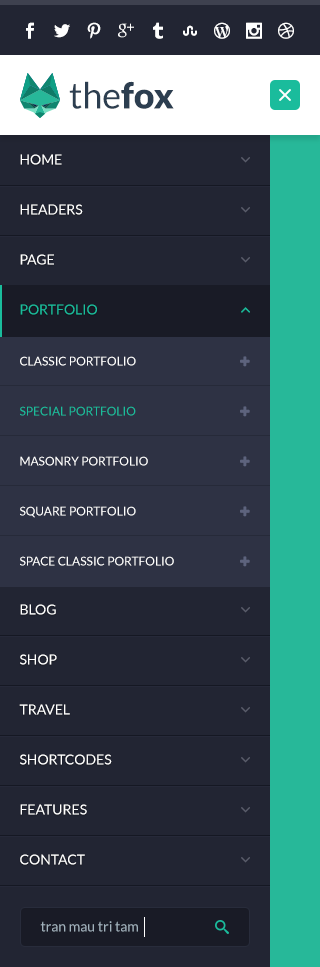
<style>
.page{position:relative;width:320px;height:967px;background:#222533}
.page>*{position:absolute;margin:0}
.t1{font:36px "Lato-Regular";color:#2c3e50}
.t2{font:36px "Lato-Black";color:#2c3e50}
.t3{font:14px/50px "Lato-Regular";color:#ffffff;text-transform:uppercase}
.t4{font:14px/50px "Lato-Regular";color:#1abc9c;text-transform:uppercase}
.t5{font:12px/50px "Lato-Regular";color:#ffffff;text-transform:uppercase}
.t6{font:12px/50px "Lato-Regular";color:#1abc9c;text-transform:uppercase}
.t7{font:14px "Lato-Regular";color:#a1b1bc}
</style>
<div class="page">
<p class="t1" style="left:69px;top:81px;width:105px;height:28px">the<span class="t2">fox</span></p>
<p class="t3" style="left:19px;top:154px;width:93px;height:711px">Home<br>HEADERS<br>Page<br><span class="t4">Portfolio<br></span><br><br><br><br><br>Blog<br>shop<br>travel<br>shortcodes<br>features<br>contact</p>
<p class="t5" style="left:20px;top:356px;width:154px;height:210px">Classic Portfolio<br><span class="t6">Special Portfolio<br></span>Masonry Portfolio<br>Square Portfolio<br>Space Classic Portfolio</p>
<p class="t7" style="left:40px;top:921px;width:98px;height:11px">tran mau tri tam</p>
</div>
